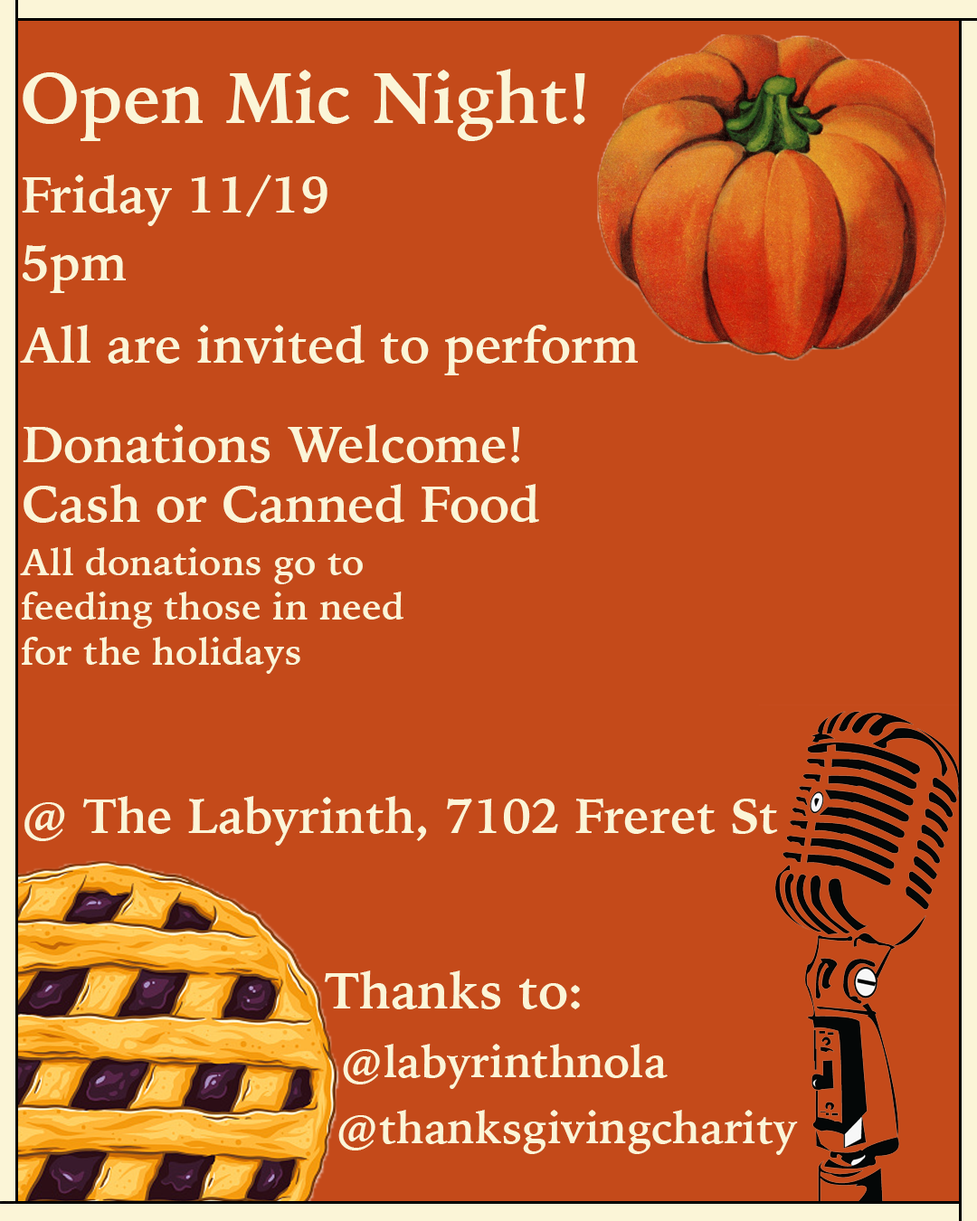
<style>
.page{position:relative;width:977px;height:1221px;background:#c44a1a}
.page>*{position:absolute;margin:0}
.t1{font:71.4px "IowanOldStyle-Bold";color:#fbf5d7}
.t2{font:50.5px "IowanOldStyle-Bold";color:#fbf5d7}
.t3{font:37.4px "IowanOldStyle-Bold";color:#fbf5d7}
.t4{font:48.8px "IowanOldStyle-Bold";color:#fbf5d7}
.t5{font:44.2px "IowanOldStyle-Bold";color:#fbf5d7}
</style>
<div class="page">
<p class="t1" style="left:23px;top:69px;width:562px;height:72px">Open Mic Night!</p>
<p class="t2" style="left:22px;top:175px;width:305px;height:51px">Friday 11/19</p>
<p class="t2" style="left:23px;top:245px;width:103px;height:48px">5pm</p>
<p class="t2" style="left:20px;top:325px;width:618px;height:50px">All are invited to perform</p>
<p class="t2" style="left:23px;top:424px;width:516px;height:99px">Donations Welcome!<br>Cash or Canned Food</p>
<p class="t3" style="left:20px;top:547px;width:383px;height:127px">All donations go to feeding those in need for the holidays</p>
<p class="t4" style="left:24px;top:796px;width:754px;height:50px">@ The Labyrinth, 7102 Freret St</p>
<p class="t2" style="left:324px;top:970px;width:256px;height:39px">Thanks to:</p>
<p class="t5" style="left:343px;top:1044px;width:324px;height:45px">@labyrinthnola<br>vv</p>
<p class="t5" style="left:338px;top:1110px;width:460px;height:45px">@thanksgivingcharity</p>
</div>
